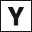
<style>
.page{position:relative;width:32px;height:32px;background:#ffffff}
.page>*{position:absolute;margin:0}
.t1{font:24px "Helvetica-Bold";letter-spacing:0.05em;color:#171717;font-weight:bold}
</style>
<div class="page">
<p class="t1" style="left:8px;top:7px;width:16px;height:19px">Y</p>
</div>
